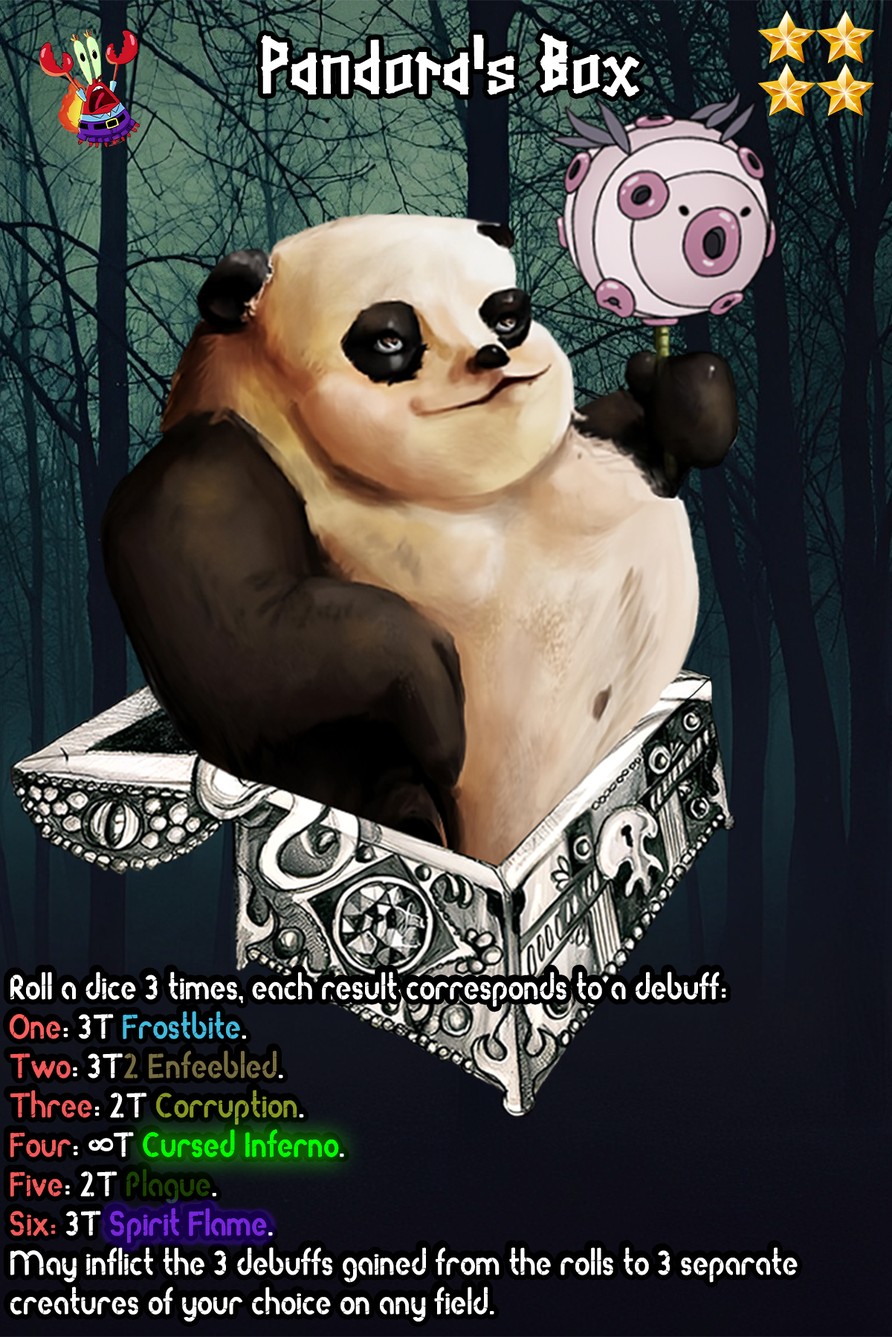
<style>
.page{position:relative;width:892px;height:1337px}
.page>*{position:absolute;margin:0}
.t1{font:144.1px "Straightwell";color:#ffffff}
.t2{font:58.7px/39.4px "RodaBamboo";color:#ffffff}
.t3{font:58.7px/39.4px "RodaBamboo";color:#ff5e5e}
.t4{font:58.7px/39.4px "RodaBamboo";color:#3fbbdf}
.t5{font:58.7px/39.4px "RodaBamboo";color:#f35959}
.t6{font:58.7px/39.4px "RodaBamboo";color:#776c40}
.t7{font:58.7px/39.4px "RodaBamboo";color:#879624}
.t8{font:58.7px/39.4px "RodaBamboo";color:#00ff00}
.t9{font:58.7px/39.4px "RodaBamboo";color:#1b3f00}
.t10{font:58.7px/39.4px "RodaBamboo";color:#7726db}
</style>
<div class="page">
<p class="t1" style="left:261px;top:33px;width:379px;height:64px">Pandora's Box</p>
<p class="t2" style="left:10px;top:972px;width:787px;height:351px">Roll a dice 3 times, each result corresponds to a debuff:<br><span class="t3">One</span>: 3T <span class="t4">Frostbite</span>.<br><span class="t5">Two</span>: 3T<span class="t6">2 Enfeebled</span>.<br><span class="t5">Three</span>: 2T <span class="t7">Corruption</span>.<br><span class="t5">Four</span>: ∞T <span class="t8">Cursed Inferno</span>.<br><span class="t5">Five</span>: 2T <span class="t9">Plague</span>.<br><span class="t5">Six:</span> 3T <span class="t10">Spirit Flame</span>.<br>May inflict the 3 debuffs gained from the rolls to 3 separate creatures of your choice on any field.</p>
</div>
